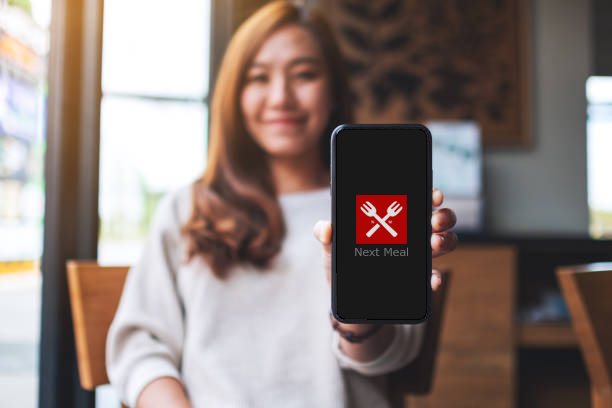
<style>
.page{position:relative;width:612px;height:408px}
.page>*{position:absolute;margin:0}
.t1{font:10.7px "Meiryo";color:#717171;scale:1.06 1}
</style>
<div class="page">
<p class="t1" style="left:355px;top:247px;width:53px;height:9px">Next Meal</p>
</div>
